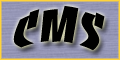
<style>
.page{position:relative;width:120px;height:60px;background:#000000}
.page>*{position:absolute;margin:0}
.t1{font:48px "Banco";color:#000000}
</style>
<div class="page">
<p class="t1" style="left:13px;top:6px;width:92px;height:45px">CMS</p>
</div>
